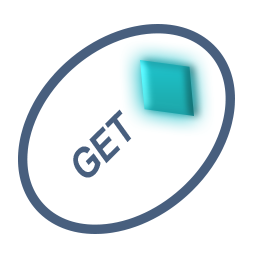
<style>
.page{position:relative;width:256px;height:256px;background:#ffffff}
.page>*{position:absolute;margin:0}
.t1{font:40.1px "Arial-BoldMT";color:#485f7e;font-style:italic;scale:0.89 1}
</style>
<div class="page">
<p class="t1" style="left:73px;top:109px;width:59px;height:69px;rotate:-45deg">GET</p>
</div>
